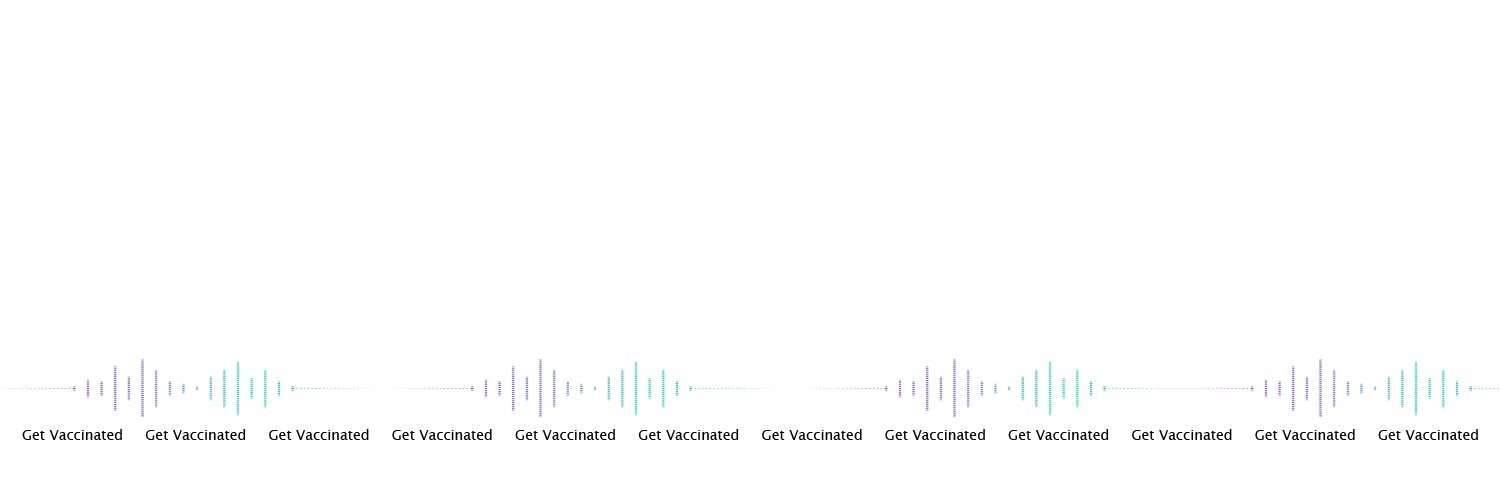
<style>
.page{position:relative;width:1500px;height:500px;background:#ffffff}
.page>*{position:absolute;margin:0}
.t1{font:14px "LucidaSansUnicode";color:#010101}
</style>
<div class="page">
<p class="t1" style="left:22px;top:429px;width:1456px;height:11px">Get Vaccinated     Get Vaccinated     Get Vaccinated     Get Vaccinated     Get Vaccinated     Get Vaccinated     Get Vaccinated     Get Vaccinated     Get Vaccinated     Get Vaccinated     Get Vaccinated     Get Vaccinated</p>
</div>
